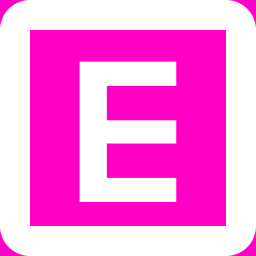
<style>
.page{position:relative;width:256px;height:256px;background:#ffffff}
.page>*{position:absolute;margin:0}
.t1{font:200px "SquareFont";color:#ffffff}
</style>
<div class="page">
<p class="t1" style="left:79px;top:61px;width:98px;height:141px">E</p>
</div>
